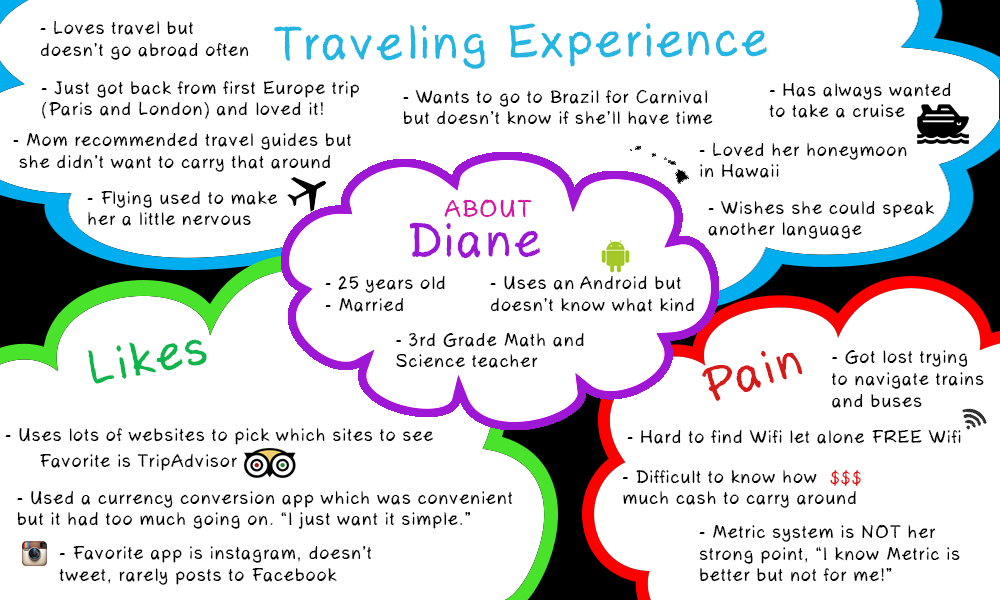
<style>
.page{position:relative;width:1000px;height:600px;background:#ffffff}
.page>*{position:absolute;margin:0}
.t1{font:18px "AxureHandwriting";letter-spacing:0.05em;color:#000000}
.t2{font:48px "AxureHandwriting";letter-spacing:0.05em;color:#22b6e1}
.t3{font:24px "AxureHandwriting";letter-spacing:0.05em;color:#d417a5}
.t4{font:48px "AxureHandwriting";letter-spacing:0.05em;color:#9c17d4}
.t5{font:48px "AxureHandwriting";letter-spacing:0.05em;color:#0eb54d}
.t6{font:48px "AxureHandwriting";letter-spacing:0.05em;color:#d61a1a}
.t7{font:18px "AxureHandwriting";letter-spacing:0.05em;color:#df1515}
</style>
<div class="page">
<p class="t1" style="left:40px;top:20px;width:209px;height:40px">- Loves travel but <br>doesn’t go abroad often</p>
<p class="t2" style="left:274px;top:22px;width:493px;height:47px;rotate:-1deg">Traveling Experience</p>
<p class="t1" style="left:41px;top:81px;width:319px;height:38px">- Just got back from first Europe trip (Paris and London) and loved it!</p>
<p class="t1" style="left:403px;top:89px;width:310px;height:36px">- Wants to go to Brazil for Carnival <br>but doesn’t know if she’ll have time</p>
<p class="t1" style="left:769px;top:83px;width:182px;height:35px">- Has always wanted<br>to take a cruise</p>
<p class="t1" style="left:13px;top:133px;width:338px;height:39px">- Mom recommended travel guides but<br> she didn’t want to carry that around</p>
<p class="t1" style="left:699px;top:142px;width:208px;height:36px">- Loved her honeymoon<br>in Hawaii</p>
<p class="t1" style="left:87px;top:191px;width:190px;height:35px">- Flying used to make<br>her a little nervous</p>
<p class="t3" style="left:444px;top:199px;width:88px;height:19px">ABOUT</p>
<p class="t1" style="left:708px;top:201px;width:226px;height:38px">- Wishes she could speak<br>another language</p>
<p class="t4" style="left:409px;top:222px;width:131px;height:36px">Diane</p>
<p class="t1" style="left:325px;top:276px;width:120px;height:36px">- 25 years old<br>- Married</p>
<p class="t1" style="left:490px;top:276px;width:204px;height:36px">- Uses an Android but doesn’t know what kind</p>
<p class="t5" style="left:88px;top:339px;width:119px;height:45px;rotate:-11deg">Likes</p>
<p class="t1" style="left:396px;top:332px;width:188px;height:36px">- 3rd Grade Math and <br>Science teacher</p>
<p class="t6" style="left:702px;top:350px;width:101px;height:51px;rotate:-17deg">Pain</p>
<p class="t1" style="left:831px;top:350px;width:153px;height:58px">- Got lost trying to navigate trains and buses</p>
<p class="t1" style="left:5px;top:428px;width:428px;height:17px">- Uses lots of websites to pick which sites to see</p>
<p class="t1" style="left:627px;top:430px;width:334px;height:14px">- Hard to find Wifi let alone FREE Wifi</p>
<p class="t1" style="left:40px;top:454px;width:197px;height:17px">Favorite is TripAdvisor</p>
<p class="t1" style="left:622px;top:470px;width:234px;height:38px">- Difficult to know how much cash to carry around</p>
<p class="t7" style="left:830px;top:470px;width:31px;height:16px">$$$</p>
<p class="t1" style="left:17px;top:491px;width:496px;height:38px">- Used a currency conversion app which was convenient<br>but it had too much going on. “I just want it simple.”</p>
<p class="t1" style="left:699px;top:524px;width:261px;height:58px">- Metric system is NOT her <br>strong point, “I know Metric is <br>better but not for me!”</p>
<p class="t1" style="left:59px;top:546px;width:313px;height:39px">- Favorite app is instagram, doesn’t <br>tweet, rarely posts to Facebook</p>
</div>
